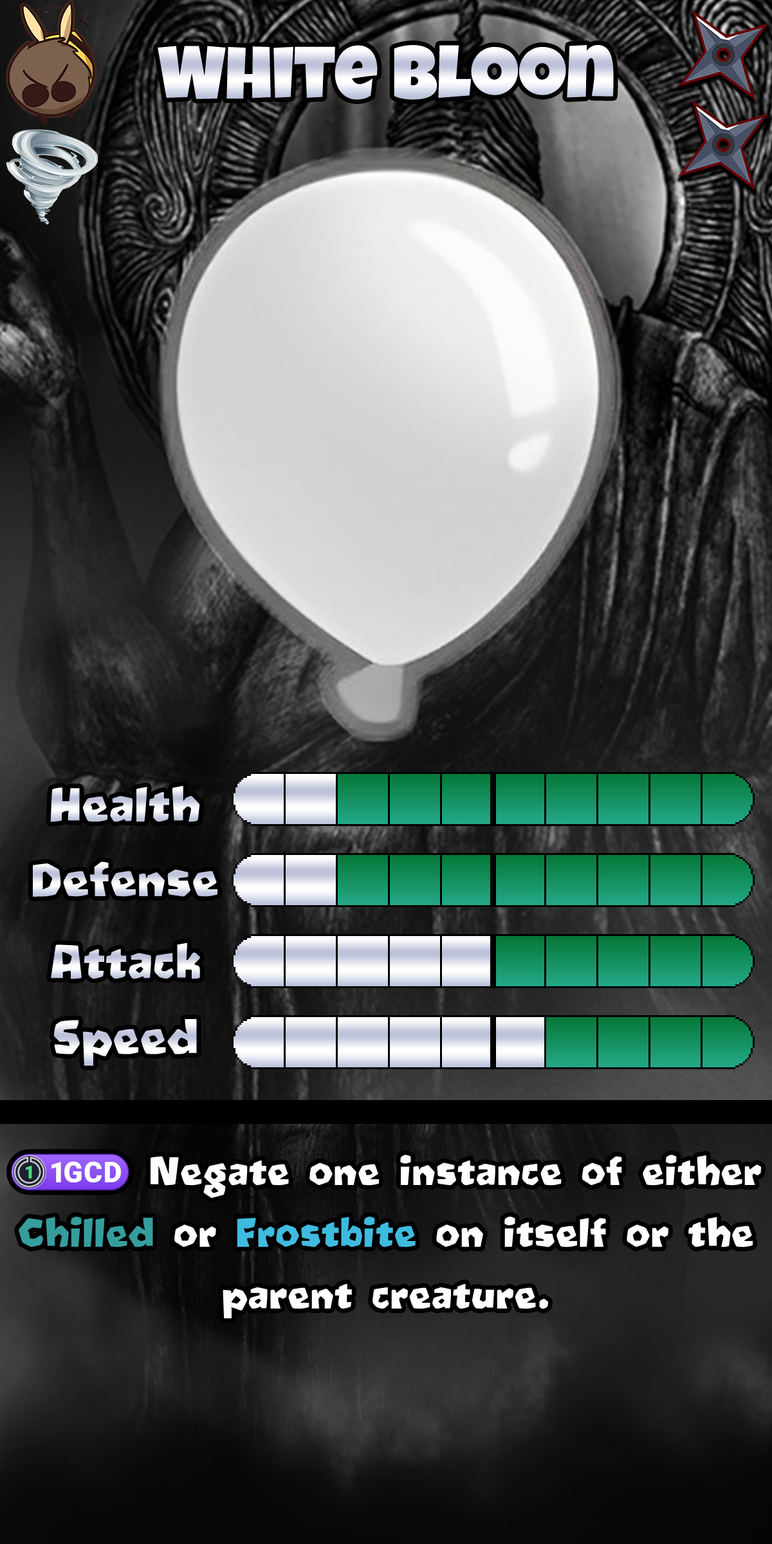
<style>
.page{position:relative;width:772px;height:1544px}
.page>*{position:absolute;margin:0}
.t1{font:128.7px "LuckiestGuy-Regular"}
.t2{font:77.2px "Oetztype"}
.t3{font:64.3px/61.8px "Oetztype";color:#ffffff}
.t4{font:64.3px/61.8px "stoogedings-Regular";color:#ffffff}
.t5{font:64.3px/61.8px "Oetztype";color:#359e9d}
.t6{font:64.3px/61.8px "Oetztype";color:#3fbbdf}
</style>
<div class="page">
<p class="t1" style="left:158px;top:45px;width:456px;height:55px">White Bloon</p>
<p class="t2" style="left:50px;top:786px;width:150px;height:36px">Health</p>
<p class="t2" style="left:33px;top:862px;width:184px;height:35px">Defense</p>
<p class="t2" style="left:51px;top:943px;width:149px;height:36px">Attack</p>
<p class="t2" style="left:54px;top:1019px;width:143px;height:47px">Speed</p>
<p class="t3" style="left:11px;top:1154px;width:750px;height:165px;text-align:center"><span class="t4">(1GCD)</span> Negate one instance of either <span class="t5">Chilled</span> or <span class="t6">Frostbite</span> on itself or the parent creature.</p>
</div>
